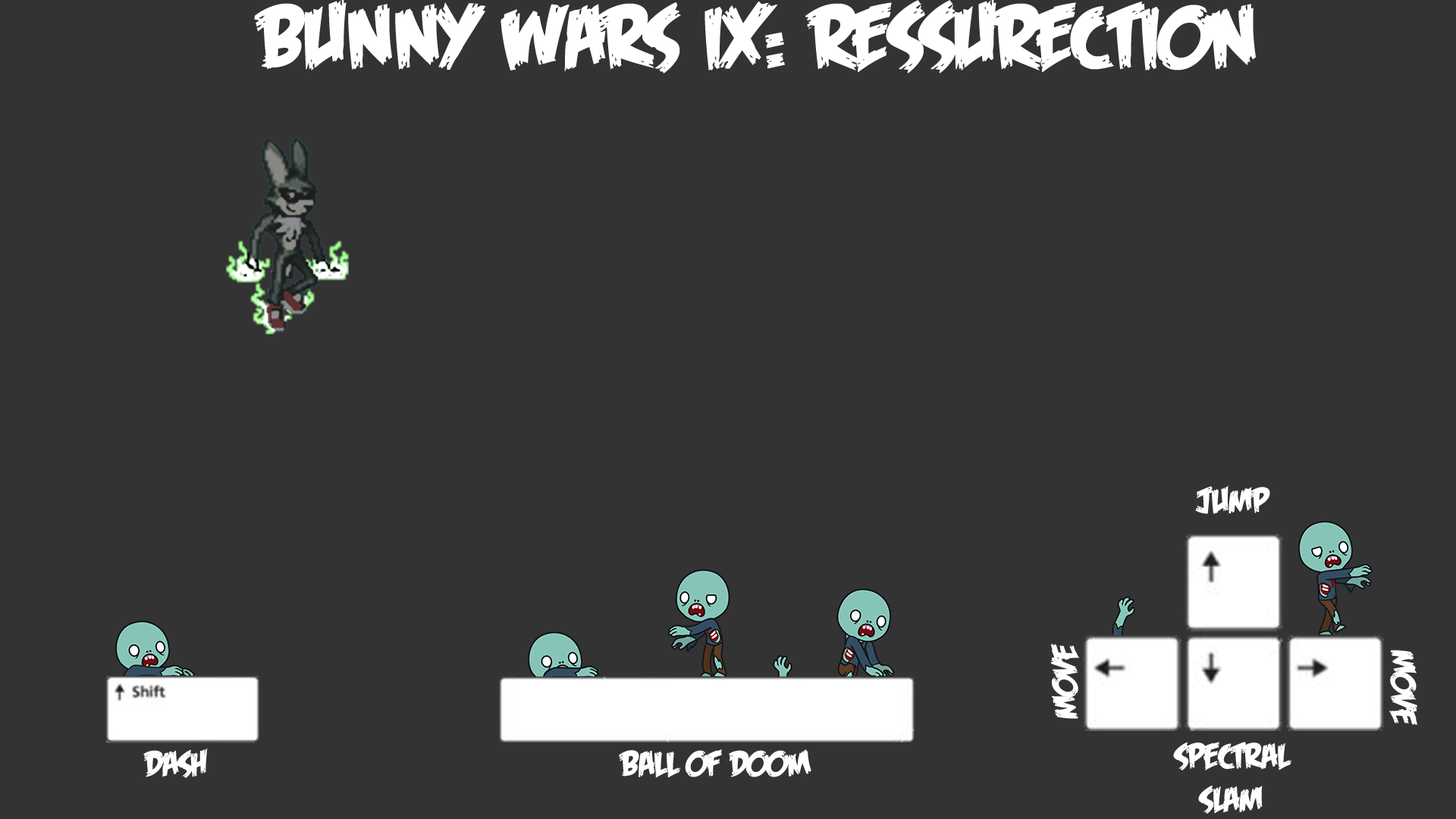
<style>
.page{position:relative;width:1456px;height:819px;background:#333333}
.page>*{position:absolute;margin:0}
.t1{font:91px "FeastofFleshBB";color:#ffffff}
.t2{font:36.4px "FeastofFleshBB";color:#ffffff}
.t3{font:36.2px "FeastofFleshBB";color:#ffffff}
</style>
<div class="page">
<p class="t1" style="left:254px;top:0px;width:1002px;height:74px">BUNNY wars IX: RESSURECTION</p>
<p class="t2" style="left:1195px;top:485px;width:75px;height:29px">jump</p>
<p class="t2" style="left:1050px;top:644px;width:29px;height:75px;rotate:-90deg">move</p>
<p class="t3" style="left:1389px;top:650px;width:28px;height:75px;rotate:90deg">move</p>
<p class="t2" style="left:143px;top:748px;width:65px;height:30px">dash</p>
<p class="t2" style="left:619px;top:749px;width:192px;height:29px">BALL OF DOOM</p>
<p class="t2" style="left:1173px;top:742px;width:118px;height:72px;text-align:center">spectral slam</p>
</div>
